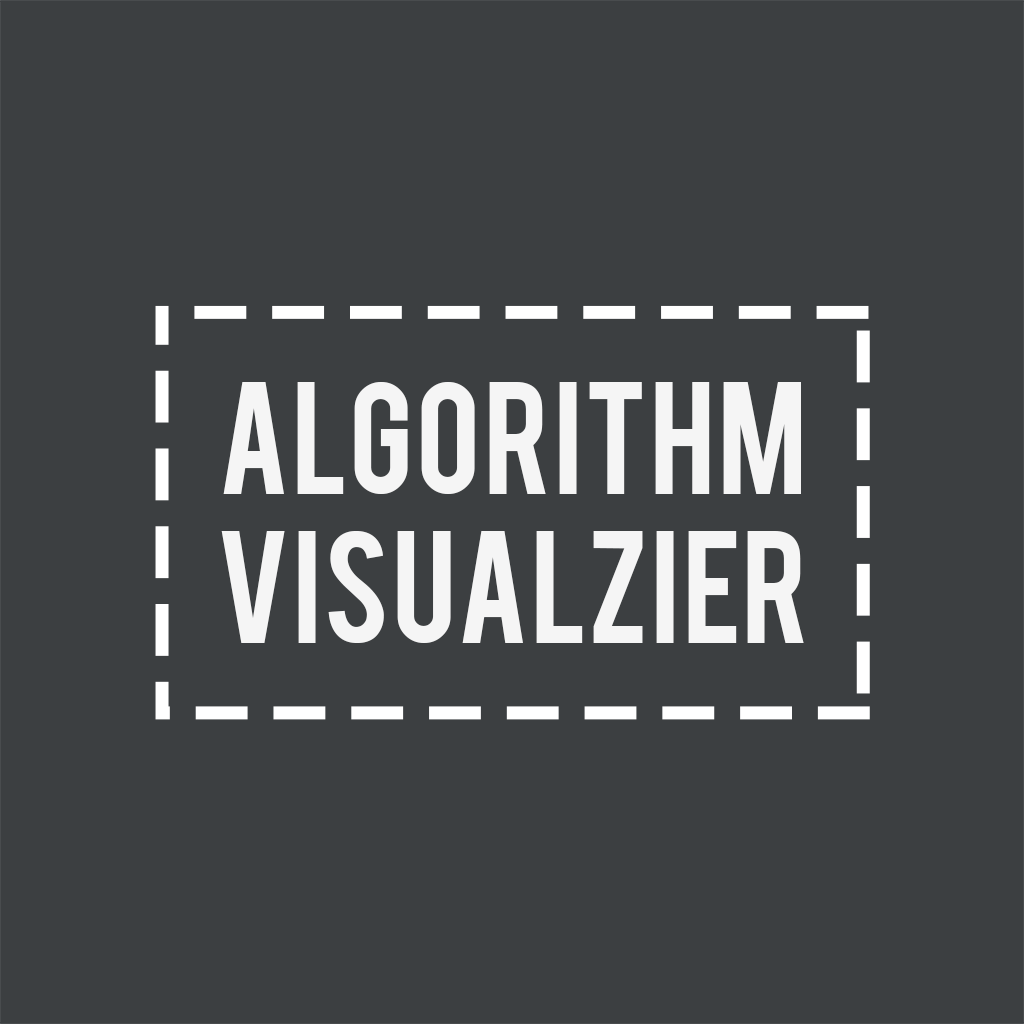
<style>
.page{position:relative;width:1024px;height:1024px;background:#3c3f41}
.page>*{position:absolute;margin:0}
.t1{font:124.4px "Bebas";color:#f5f5f5}
</style>
<div class="page">
<p class="t1" style="left:221px;top:382px;width:583px;height:261px;text-align:center">ALGORITHM<br>VISUALZIER</p>
</div>
